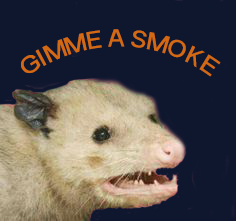
<style>
.page{position:relative;width:236px;height:221px;background:#0f172f}
.page>*{position:absolute;margin:0}
.t1{font:24px "ArialNarrow";color:#d36913}
</style>
<div class="page">
<p class="t1" style="left:21px;top:29px;width:200px;height:48px;text-align:center">GIMME A SMOKE</p>
</div>
